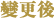
<style>
.page{position:relative;width:54px;height:19px;background:#ffffff}
.page>*{position:absolute;margin:0}
.t1{font:18px "RyuminPr6N-ExBold";letter-spacing:-0.025em;color:#b09541;font-weight:bold}
</style>
<div class="page">
<p class="t1" style="left:0px;top:0px;width:55px;height:18px">變更後</p>
</div>
